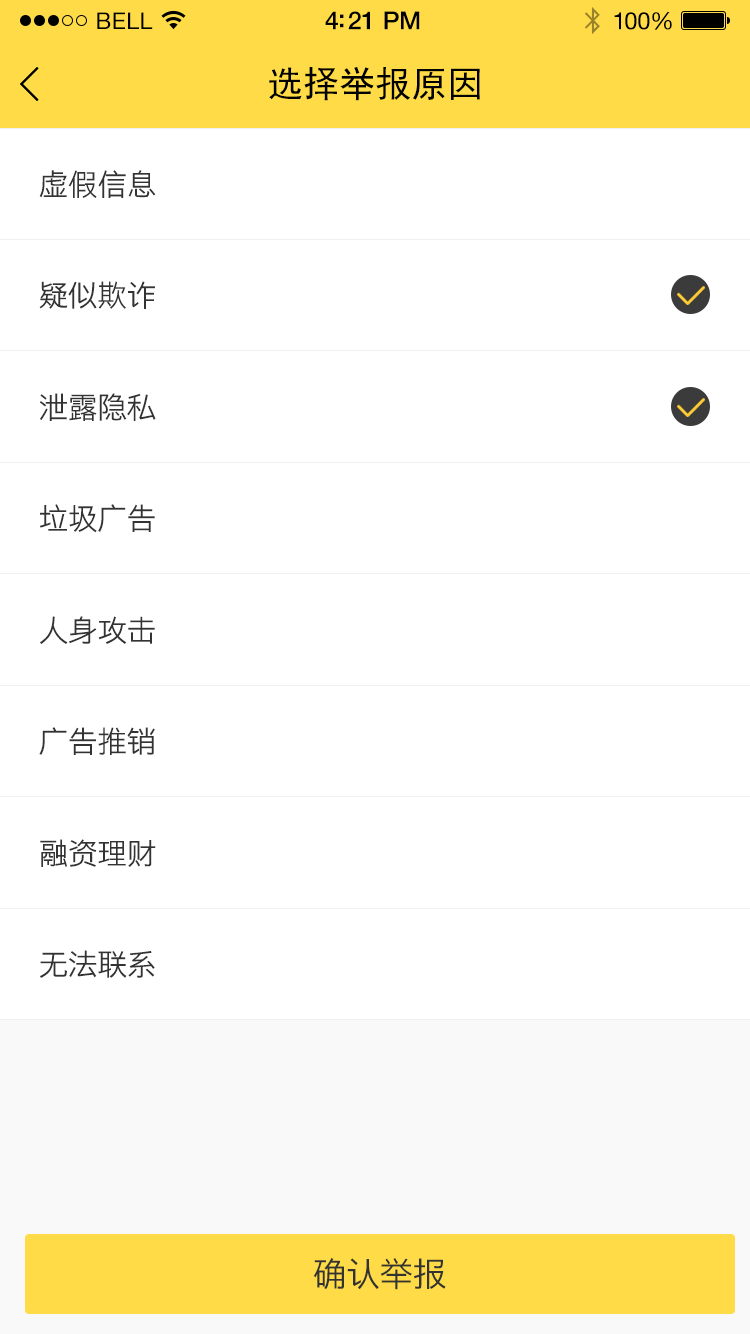
<style>
.page{position:relative;width:750px;height:1334px;background:#ffffff}
.page>*{position:absolute;margin:0}
.t1{font:23px "HelveticaNeue";letter-spacing:0.02em;color:#000000}
.t2{font:25px "HelveticaNeue-Medium";letter-spacing:-0.02em;color:#000000}
.t3{font:24px "HelveticaNeue";letter-spacing:-0.02em;color:#010101}
.t4{font:36px "SimHei";color:#000000}
.t5{font:30px "STHeitiSC-Light";letter-spacing:-0.02em;color:#333333}
.t6{font:34px "STHeitiSC-Light";letter-spacing:-0.02em;color:#333333}
</style>
<div class="page">
<p class="t1" style="left:97px;top:12px;width:56px;height:17px">BELL</p>
<p class="t1" style="left:97px;top:12px;width:56px;height:17px">BELL</p>
<p class="t2" style="left:325px;top:11px;width:95px;height:19px">4:21 PM</p>
<p class="t2" style="left:325px;top:11px;width:95px;height:19px">4:21 PM</p>
<p class="t3" style="left:614px;top:12px;width:58px;height:18px">100%</p>
<p class="t3" style="left:614px;top:12px;width:58px;height:18px">100%</p>
<p class="t4" style="left:269px;top:66px;width:211px;height:35px">选择举报原因</p>
<p class="t5" style="left:39px;top:170px;width:117px;height:28px">虚假信息</p>
<p class="t5" style="left:39px;top:281px;width:116px;height:28px">疑似欺诈</p>
<p class="t5" style="left:39px;top:393px;width:117px;height:28px">泄露隐私</p>
<p class="t5" style="left:39px;top:504px;width:116px;height:29px">垃圾广告</p>
<p class="t5" style="left:39px;top:616px;width:116px;height:28px">人身攻击</p>
<p class="t5" style="left:39px;top:727px;width:116px;height:28px">广告推销</p>
<p class="t5" style="left:40px;top:839px;width:116px;height:28px">融资理财</p>
<p class="t5" style="left:39px;top:950px;width:116px;height:28px">无法联系</p>
<p class="t6" style="left:313px;top:1258px;width:133px;height:32px">确认举报</p>
</div>
